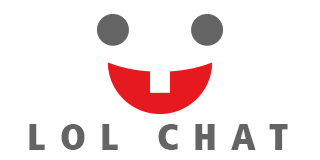
<style>
.page{position:relative;width:320px;height:160px;background:#ffffff}
.page>*{position:absolute;margin:0}
.t1{font:37.2px "FrutigerLT-ExtraBlackCn";letter-spacing:0.38em;color:#646464}
</style>
<div class="page">
<p class="t1" style="left:29px;top:124px;width:259px;height:26px">LOL CHAT</p>
</div>
